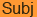
<style>
.page{position:relative;width:37px;height:17px;background:#ff9933}
.page>*{position:absolute;margin:0}
.t1{font:16px "Helvetica";color:#32260f}
</style>
<div class="page">
<p class="t1" style="left:2px;top:2px;width:31px;height:15px">Subj</p>
</div>
